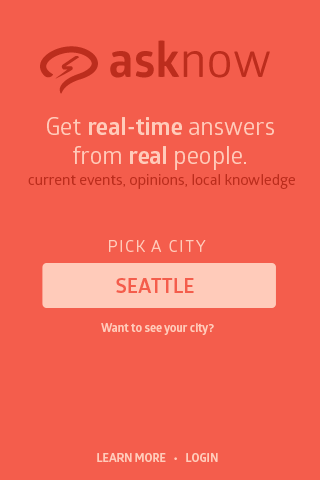
<style>
.page{position:relative;width:320px;height:480px;background:#f45d4c}
.page>*{position:absolute;margin:0}
.t1{font:23.9px "GloberRegular";color:#ffcbba}
.t2{font:23.9px "GloberBold";color:#ffcbba}
.t3{font:15px "GloberRegular";color:#bc2d1d}
.t4{font:16px "GloberRegular";letter-spacing:0.1em;color:#ffcbba;text-transform:uppercase}
.t5{font:20.2px "GloberBold";color:#f45d4c;text-transform:uppercase}
.t6{font:11.7px "GloberBold";color:#ffcbba}
.t7{font:11.7px "GloberBold";color:#ffcbba;text-transform:uppercase}
</style>
<div class="page">
<p class="t1" style="left:47px;top:117px;width:227px;height:53px;text-align:center">Get <span class="t2">real-time</span> answers from <span class="t2">real </span>people.</p>
<p class="t3" style="left:28px;top:174px;width:267px;height:15px">current events, opinions, local knowledge</p>
<p class="t4" style="left:109px;top:240px;width:97px;height:12px">pick a city</p>
<p class="t5" style="left:116px;top:278px;width:78px;height:15px">seattle</p>
<p class="t6" style="left:101px;top:323px;width:113px;height:12px">Want to see your city?</p>
<p class="t7" style="left:97px;top:453px;width:121px;height:9px">Learn More   •   Login</p>
</div>
